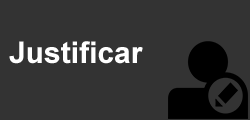
<style>
.page{position:relative;width:250px;height:120px;background:#333333}
.page>*{position:absolute;margin:0}
.t1{font:30px "Arial-BoldMT";color:#ffffff}
</style>
<div class="page">
<p class="t1" style="left:9px;top:41px;width:134px;height:23px">Justificar</p>
</div>
